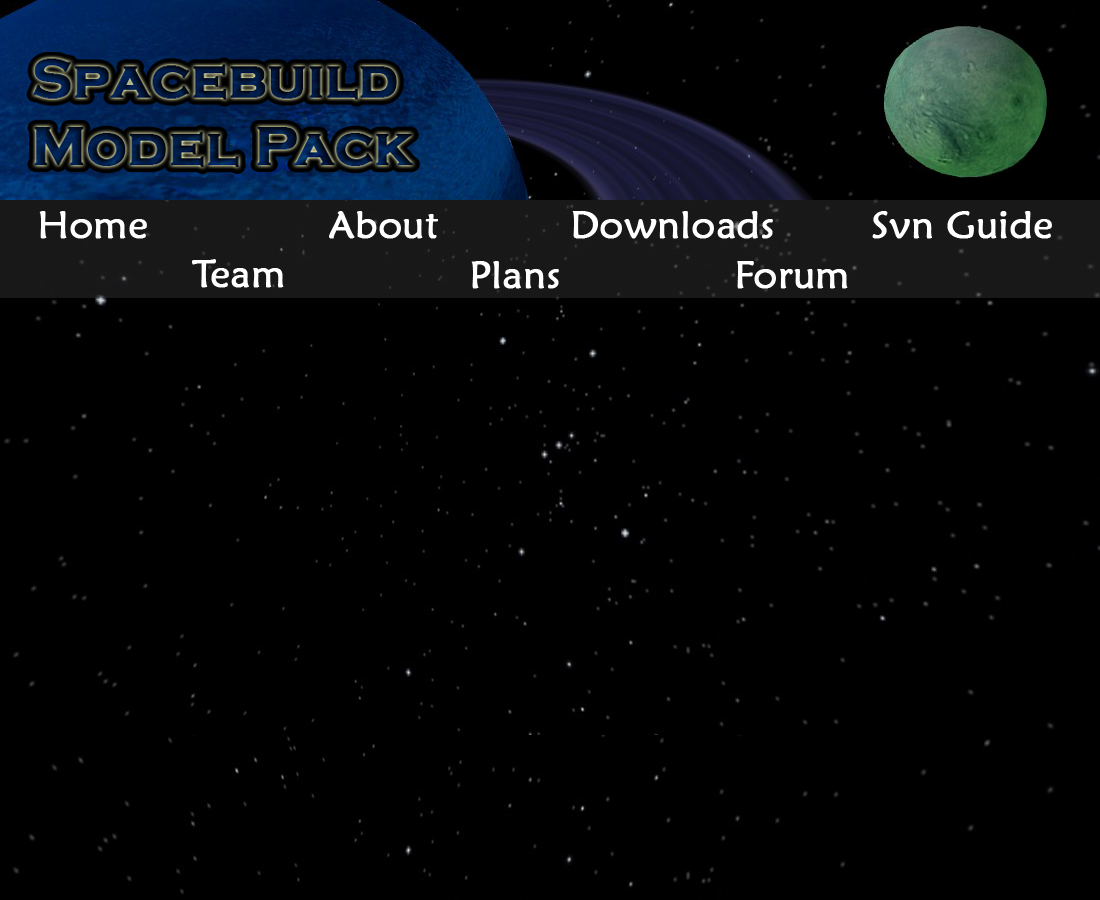
<style>
.page{position:relative;width:1100px;height:900px;background:#000000}
.page>*{position:absolute;margin:0}
.t1{font:39px "MaiandraGD-Regular";color:#ffffff;font-weight:bold}
</style>
<div class="page">
<p class="t1" style="left:39px;top:211px;width:108px;height:28px">Home</p>
<p class="t1" style="left:329px;top:211px;width:109px;height:28px">About</p>
<p class="t1" style="left:572px;top:211px;width:201px;height:28px">Downloads</p>
<p class="t1" style="left:872px;top:211px;width:180px;height:28px">Svn Guide</p>
<p class="t1" style="left:192px;top:259px;width:92px;height:29px">Team</p>
<p class="t1" style="left:471px;top:261px;width:88px;height:28px">Plans</p>
<p class="t1" style="left:737px;top:261px;width:111px;height:28px">Forum</p>
</div>
